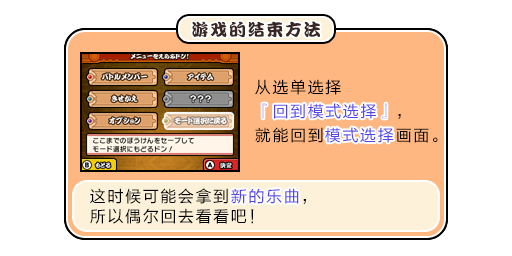
<style>
.page{position:relative;width:512px;height:256px;background:#ffffff}
.page>*{position:absolute;margin:0}
.t1{font:17px "DFPKanTingLiuW9";letter-spacing:0.1em;color:#3b2626}
.t2{font:16px/24px "FZLTHJW--GB1-0";letter-spacing:0.1em;color:#5444ed}
.t3{font:16px/24px "FZLTHJW--GB1-0";letter-spacing:0.1em;color:#000000}
.t4{font:16px "FZLTHJW--GB1-0";letter-spacing:0.1em;color:#5444ed}
.t5{font:16px/20px "FZLTHJW--GB1-0";letter-spacing:0.1em;color:#000000}
.t6{font:16px/20px "FZLTHJW--GB1-0";letter-spacing:0.1em;color:#5444ed}
</style>
<div class="page">
<p class="t1" style="left:192px;top:21px;width:128px;height:17px">游戏的结束方法</p>
<p class="t2" style="left:255px;top:79px;width:183px;height:64px"><span class="t3">从选单选择<br></span>『回到模式选择」<span class="t3">，<br>就能回到</span>模式选择<span class="t3">画面。</span></p>
<p class="t4" style="left:262px;top:103px;width:125px;height:16px">『回到模式选择』</p>
<p class="t4" style="left:325px;top:127px;width:69px;height:16px">模式选择</p>
<p class="t5" style="left:90px;top:188px;width:216px;height:36px">这时候可能会拿到<span class="t6">新的乐曲</span>，<br>所以偶尔回去看看吧！</p>
<p class="t4" style="left:231px;top:188px;width:68px;height:16px">新的乐曲</p>
</div>
